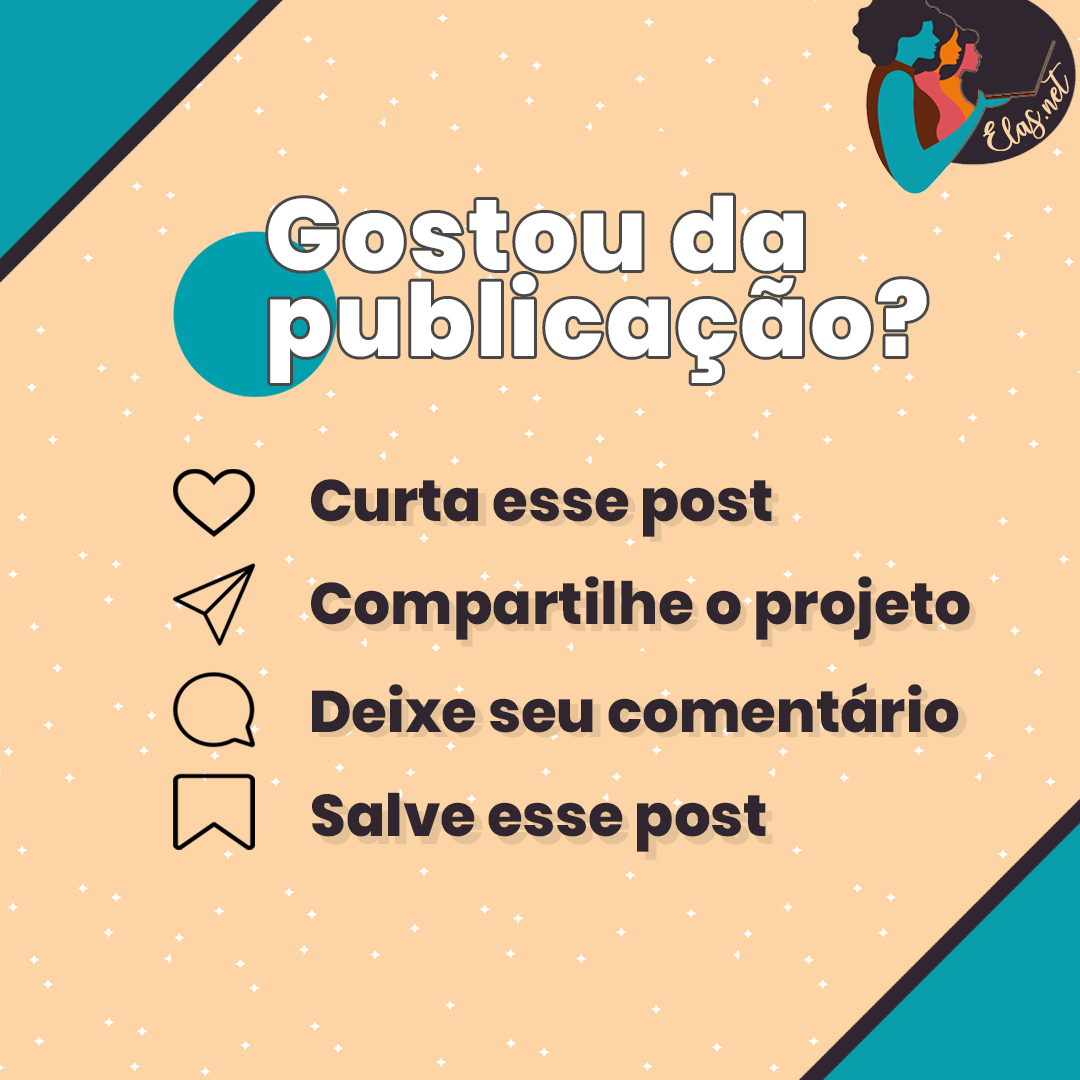
<style>
.page{position:relative;width:1080px;height:1080px;background:#fcd4a5}
.page>*{position:absolute;margin:0}
.t1{font:25px "charlinda-Regular";color:#fcd4a5;scale:1.18 1}
.t2{font:100.3px/85.3px "Poppins-ExtraBold";letter-spacing:0.03em;color:#ffffff}
.t3{font:58.5px "Poppins-ExtraBold";color:#2f262f}
</style>
<div class="page">
<p class="t1" style="left:983px;top:62px;width:86px;height:89px;rotate:-43deg">Elas.net</p>
<p class="t2" style="left:268px;top:195px;width:659px;height:188px">Gostou da<br>publicação?</p>
<p class="t3" style="left:311px;top:479px;width:461px;height:58px">Curta esse post</p>
<p class="t3" style="left:311px;top:576px;width:659px;height:64px">Compartilhe o projeto</p>
<p class="t3" style="left:312px;top:682px;width:647px;height:51px">Deixe seu comentário</p>
<p class="t3" style="left:312px;top:792px;width:454px;height:60px">Salve esse post</p>
</div>
